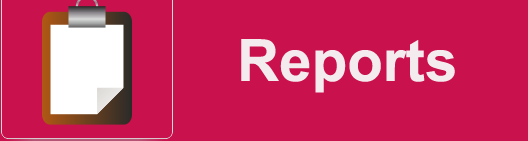
<style>
.page{position:relative;width:528px;height:141px;background:#c9114d}
.page>*{position:absolute;margin:0}
.t1{font:58.3px "Arial-BoldMT";color:#f4ebee}
</style>
<div class="page">
<p class="t1" style="left:241px;top:39px;width:214px;height:54px">Reports</p>
</div>
